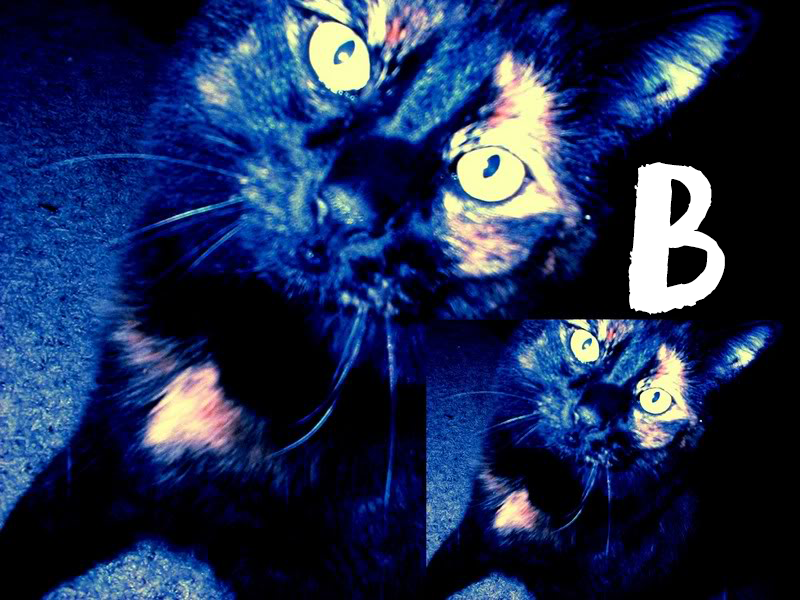
<style>
.page{position:relative;width:800px;height:600px}
.page>*{position:absolute;margin:0}
.t1{font:120px "Summeron";color:#ffffff}
</style>
<div class="page">
<p class="t1" style="left:628px;top:162px;width:97px;height:153px">B</p>
</div>
